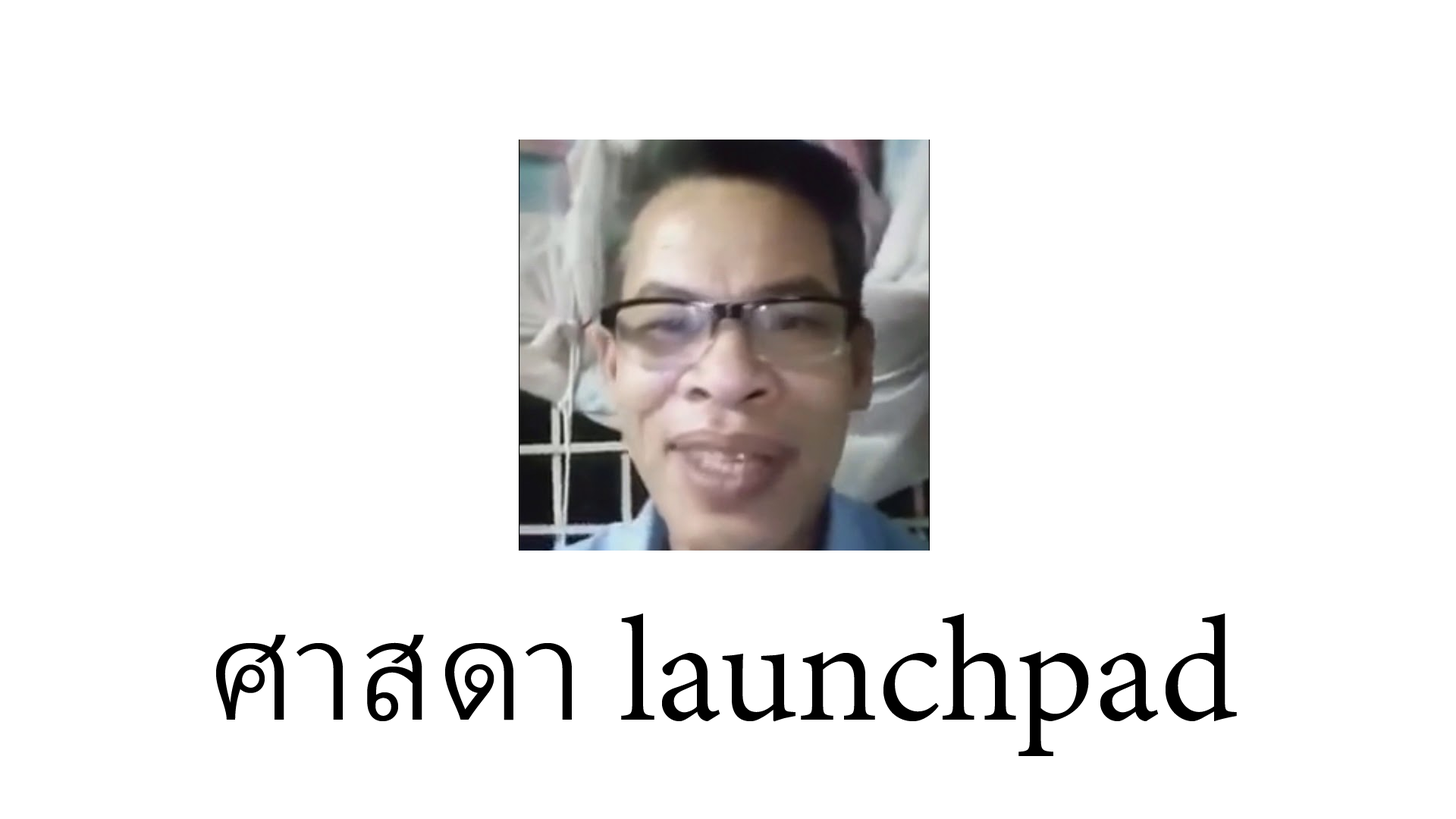
<style>
.page{position:relative;width:1456px;height:819px;background:#ffffff}
.page>*{position:absolute;margin:0}
.t1{font:182px "AdobeThai-Regular";color:#000000}
</style>
<div class="page">
<p class="t1" style="left:216px;top:613px;width:1021px;height:143px">ศาสดา launchpad</p>
</div>
